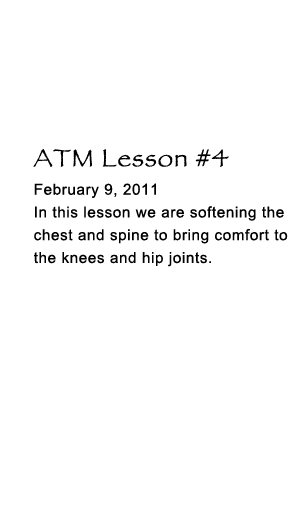
<style>
.page{position:relative;width:305px;height:523px;background:#ffffff}
.page>*{position:absolute;margin:0}
.t1{font:26.1px/22.8px "ArialMT";letter-spacing:0.04em;color:#000000}
.t2{font:43.3px/22.8px "Papyrus";letter-spacing:0.04em;color:#000000}
</style>
<div class="page">
<p class="t1" style="left:33px;top:149px;width:255px;height:118px"><span class="t2">ATM Lesson #4<br></span>February 9, 2011<br>In this lesson we are softening the <br>chest and spine to bring comfort to <br>the knees and hip joints.</p>
</div>
